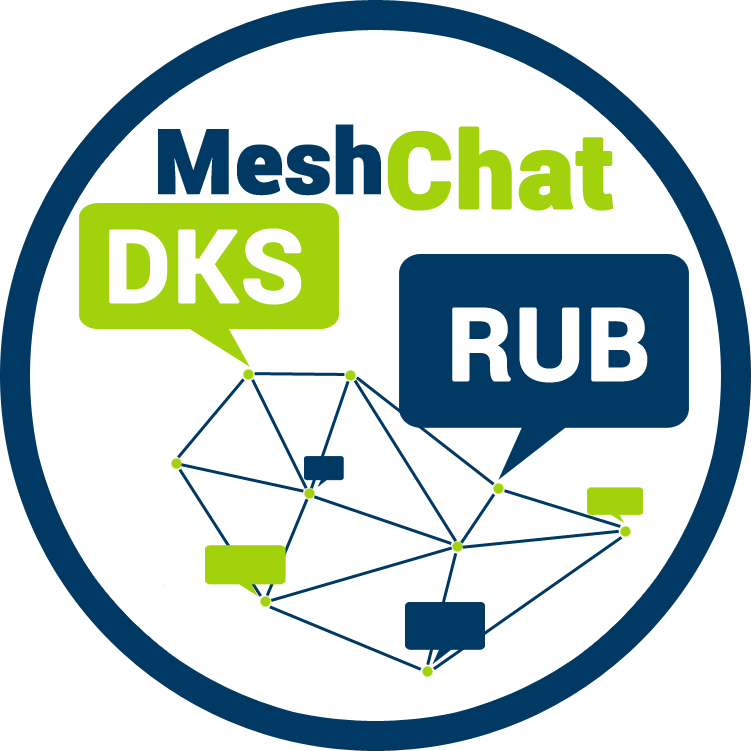
<style>
.page{position:relative;width:751px;height:751px;background:#ffffff}
.page>*{position:absolute;margin:0}
.t1{font:90px "Roboto-Black";color:#003963;font-weight:bold}
.t2{font:105px "Roboto-Black";color:#a2d20c;font-weight:bold}
.t3{font:100px "Roboto-Bold";color:#ffffff;font-weight:bold}
</style>
<div class="page">
<p class="t1" style="left:158px;top:124px;width:456px;height:87px">Mesh<span class="t2">Chat</span></p>
<p class="t3" style="left:109px;top:228px;width:193px;height:77px">DKS</p>
<p class="t3" style="left:452px;top:307px;width:196px;height:76px">RUB</p>
</div>
